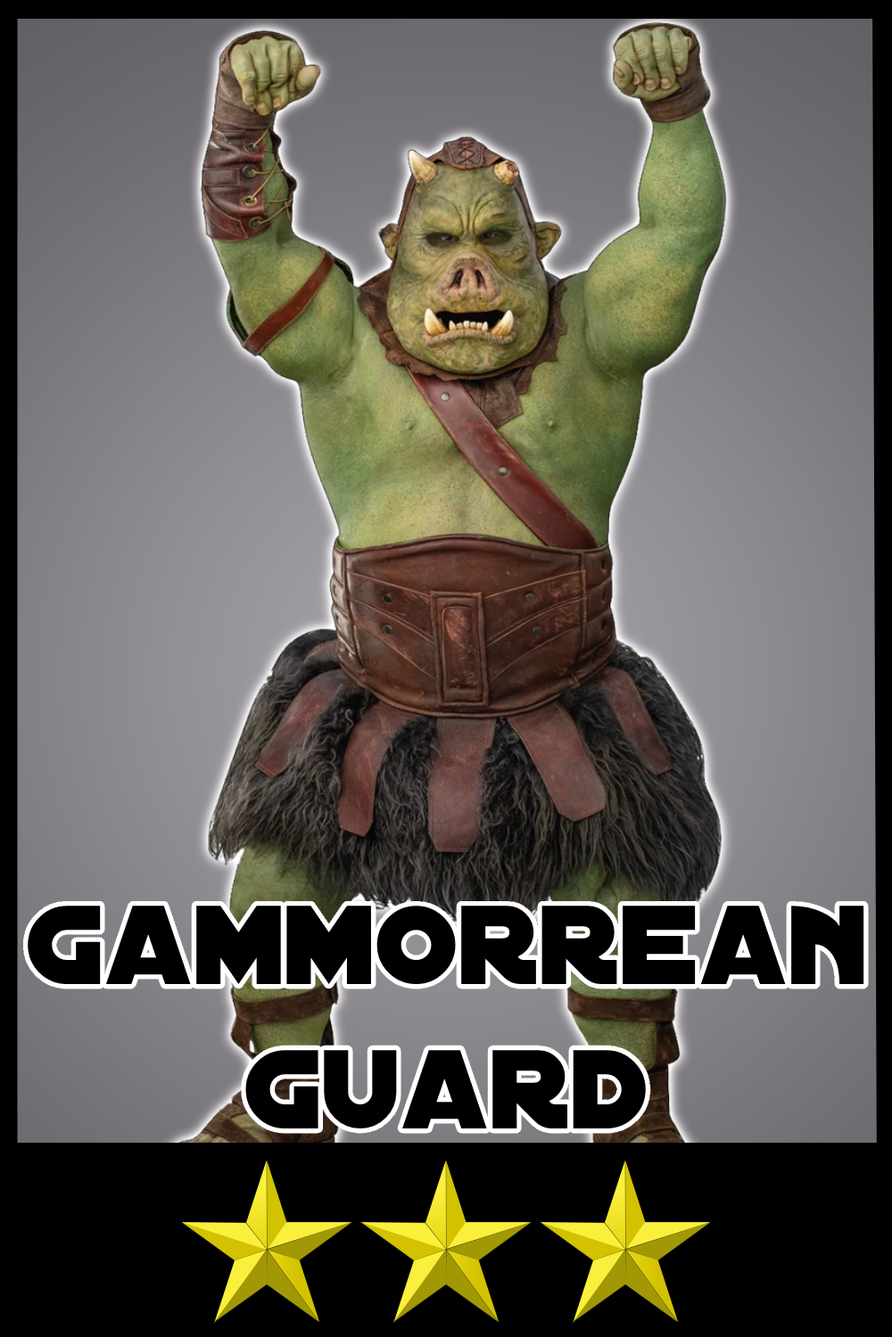
<style>
.page{position:relative;width:892px;height:1337px;background:#000000}
.page>*{position:absolute;margin:0}
.t1{font:120.4px "DistantGalaxy";color:#000000}
</style>
<div class="page">
<p class="t1" style="left:28px;top:906px;width:836px;height:224px;text-align:center">Gammorrean<br>guard</p>
</div>
